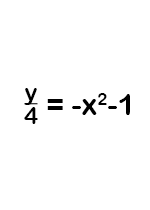
<style>
.page{position:relative;width:150px;height:210px;background:#ffffff}
.page>*{position:absolute;margin:0}
.t1{font:24px/24px "ArialRoundedMTBold";color:#000000;text-decoration:underline}
.t2{font:24px/24px "ArialRoundedMTBold";color:#000000}
.t3{font:30px "ArialRoundedMTBold";color:#000000}
</style>
<div class="page">
<p class="t1" style="left:24px;top:88px;width:14px;height:36px;text-align:center">y<br><span class="t2">4</span></p>
<p class="t3" style="left:47px;top:93px;width:83px;height:22px">= -x2-1</p>
</div>
